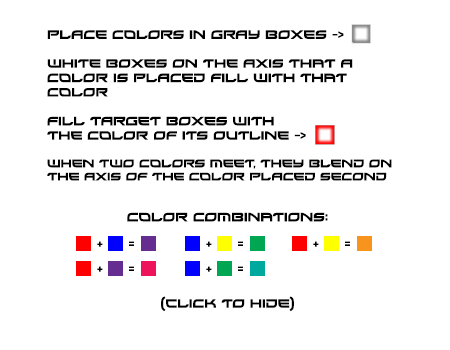
<style>
.page{position:relative;width:450px;height:350px;background:#ffffff}
.page>*{position:absolute;margin:0}
.t1{font:12px "Xirod-Regular";color:#000000}
.t2{font:11px "Xirod-Regular";color:#000000}
</style>
<div class="page">
<p class="t1" style="left:47px;top:30px;width:345px;height:282px">Place colors in gray boxes -&gt;<br><br>White boxes on the Axis that a color is placed fill with that color<br><br>Fill target boxes with <br>The Color of its outline -&gt;<br><br><span class="t2">When two colors Meet, They blend on the axis of the color placed second<br><br><br></span>Color Combinations:<br><br><br><br><br><br>(click to hide)</p>
<p class="t1" style="left:97px;top:241px;width:6px;height:6px">+</p>
<p class="t1" style="left:129px;top:241px;width:5px;height:5px">=</p>
<p class="t1" style="left:206px;top:241px;width:6px;height:6px">+</p>
<p class="t1" style="left:238px;top:241px;width:5px;height:5px">=</p>
<p class="t1" style="left:313px;top:241px;width:6px;height:6px">+</p>
<p class="t1" style="left:345px;top:241px;width:5px;height:5px">=</p>
<p class="t1" style="left:97px;top:266px;width:6px;height:6px">+</p>
<p class="t1" style="left:129px;top:266px;width:5px;height:5px">=</p>
<p class="t1" style="left:206px;top:266px;width:6px;height:6px">+</p>
<p class="t1" style="left:238px;top:266px;width:5px;height:5px">=</p>
</div>
